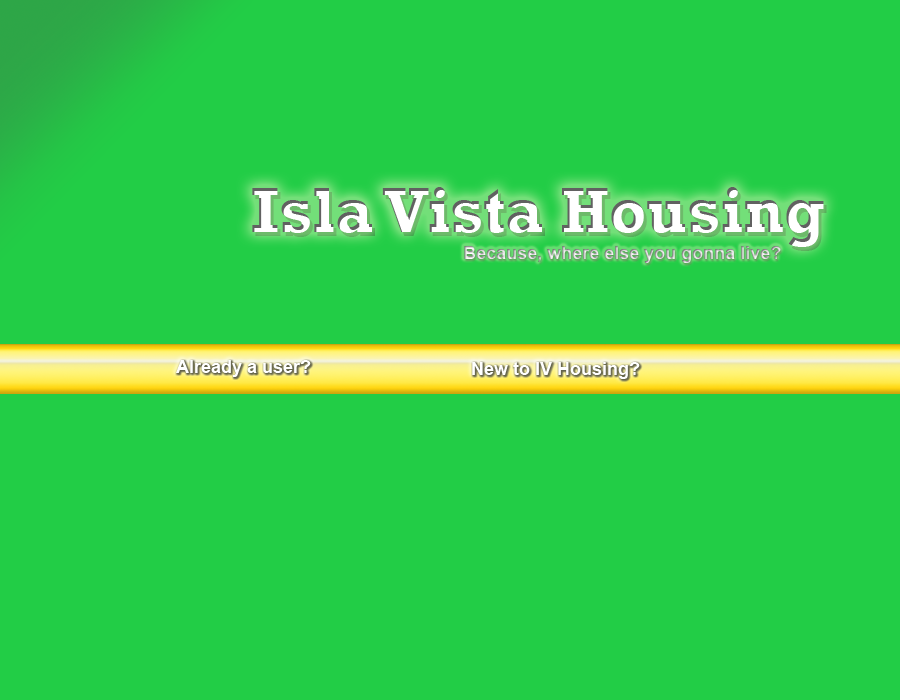
<style>
.page{position:relative;width:900px;height:700px;background:#22cd46}
.page>*{position:absolute;margin:0}
.t1{font:65px "Rockwell-Bold";color:#ffffff}
.t2{font:18px "Arial-BoldMT"}
.t3{font:18px "Arial-BoldMT";color:#ffffff}
</style>
<div class="page">
<p class="t1" style="left:252px;top:187px;width:572px;height:60px">Isla Vista Housing</p>
<p class="t2" style="left:464px;top:246px;width:317px;height:17px">Because, where else you gonna live?</p>
<p class="t3" style="left:176px;top:360px;width:135px;height:17px">Already a user?</p>
<p class="t3" style="left:472px;top:362px;width:168px;height:17px">New to IV Housing?</p>
</div>
